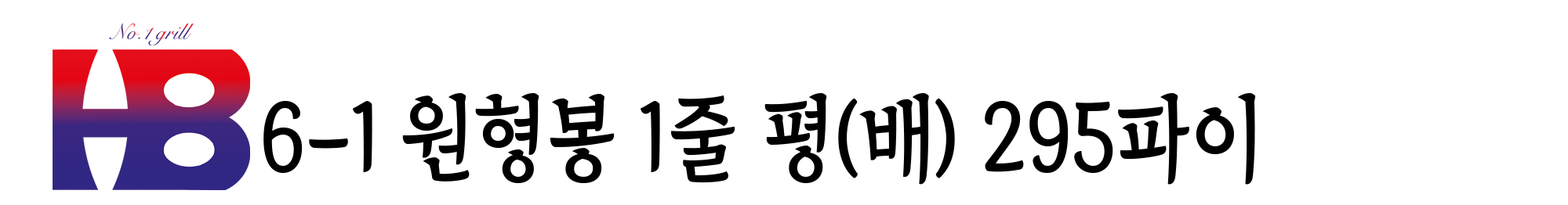
<style>
.page{position:relative;width:1568px;height:205px;background:#ffffff}
.page>*{position:absolute;margin:0}
.t1{font:93.7px "TheIndependenceHallofKorea-Regular";color:#000000;scale:0.89 1}
</style>
<div class="page">
<p class="t1" style="left:263px;top:93px;width:993px;height:92px">6-1 원형봉 1줄 평(배) 295파이</p>
</div>
